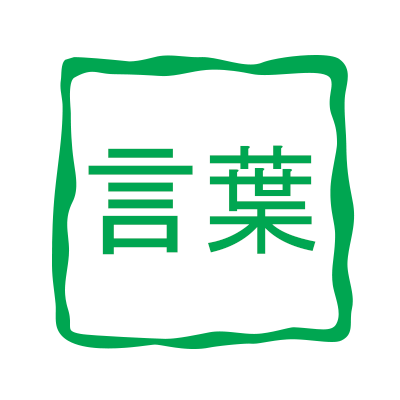
<style>
.page{position:relative;width:400px;height:400px;background:#ffffff}
.page>*{position:absolute;margin:0}
.t1{font:120px "MS-Gothic";color:#00a651}
</style>
<div class="page">
<p class="t1" style="left:88px;top:145px;width:228px;height:110px">言葉</p>
</div>
